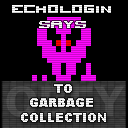
<style>
.page{position:relative;width:128px;height:128px;background:#000000}
.page>*{position:absolute;margin:0}
.t1{font:12px "SpaceMarine-Nominal"}
.t2{font:12px "Arial-Black"}
</style>
<div class="page">
<p class="t1" style="left:12px;top:5px;width:99px;height:23px;text-align:center">echoLogin<br>SAYS</p>
<p class="t2" style="left:21px;top:84px;width:85px;height:38px;text-align:center">TO<br>GARBAGE <br>COLLECTION</p>
</div>
